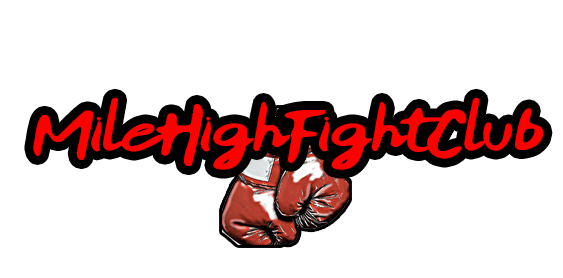
<style>
.page{position:relative;width:563px;height:278px;background:#ffffff}
.page>*{position:absolute;margin:0}
.t1{font:75px "RecklessArt";color:#ff0000;font-style:italic}
</style>
<div class="page">
<p class="t1" style="left:33px;top:97px;width:511px;height:73px">MileHighFightClub</p>
</div>
